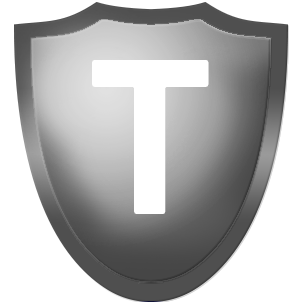
<style>
.page{position:relative;width:302px;height:302px;background:#ffffff}
.page>*{position:absolute;margin:0}
.t1{font:220px "Barlow-Bold";color:#ffffff}
</style>
<div class="page">
<p class="t1" style="left:92px;top:60px;width:117px;height:154px">T</p>
</div>
